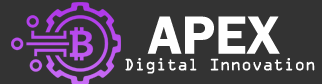
<style>
.page{position:relative;width:322px;height:84px;background:#333333}
.page>*{position:absolute;margin:0}
.t1{font:55.4px "FranklinGothic-Demi";color:#ffffff}
.t2{font:17.6px "OCRAExtended";color:#ffffff}
</style>
<div class="page">
<p class="t1" style="left:147px;top:16px;width:133px;height:38px">APEX</p>
<p class="t2" style="left:125px;top:58px;width:190px;height:16px">Digital Innovation</p>
</div>
